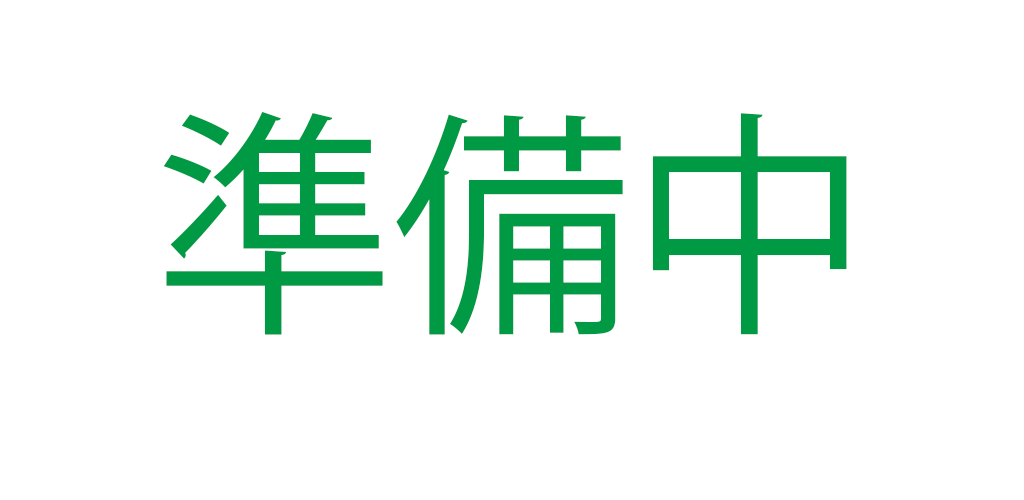
<style>
.page{position:relative;width:1024px;height:500px;background:#ffffff}
.page>*{position:absolute;margin:0}
.t1{font:237.9px "KozGoPr6N-Regular";color:#009944;font-variant:small-caps}
</style>
<div class="page">
<p class="t1" style="left:163px;top:111px;width:684px;height:224px">準備中</p>
</div>
